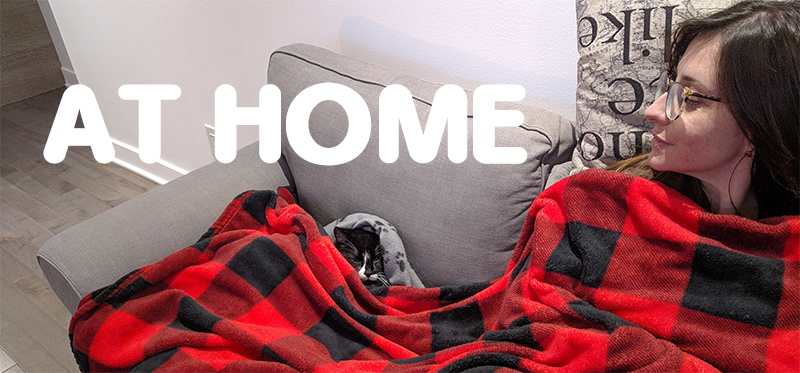
<style>
.page{position:relative;width:800px;height:373px}
.page>*{position:absolute;margin:0}
.t1{font:115.3px "SimplyRounded-Bold";letter-spacing:-0.01em;color:#ffffff}
</style>
<div class="page">
<p class="t1" style="left:43px;top:82px;width:485px;height:84px">AT HOME</p>
</div>
